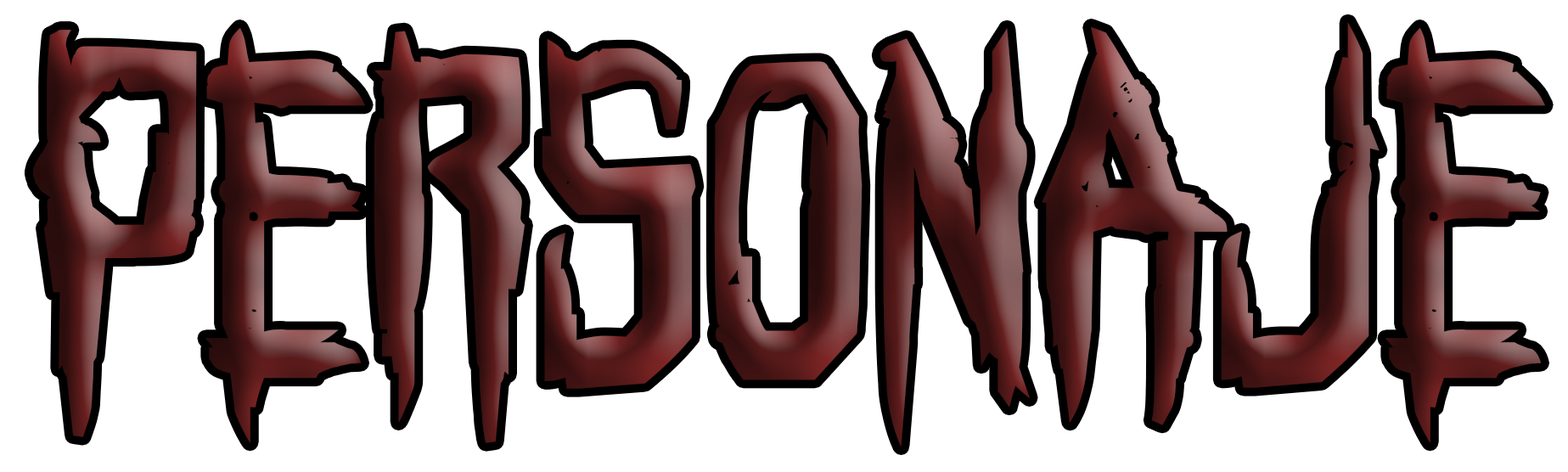
<style>
.page{position:relative;width:1568px;height:472px;background:#ffffff}
.page>*{position:absolute;margin:0}
.t1{font:461px "HorroroidBold"}
</style>
<div class="page">
<p class="t1" style="left:32px;top:22px;width:1513px;height:425px">PERSONAJE</p>
</div>
